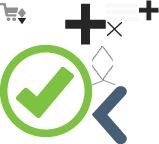
<style>
.page{position:relative;width:159px;height:144px;background:#ffffff}
.page>*{position:absolute;margin:0}
.t1{font:84px "OpenSans-Bold";color:#262626}
.t2{font:37.2px "Helvetica-Bold";color:#262626}
</style>
<div class="page">
<p class="t1" style="left:65px;top:3px;width:41px;height:42px">+</p>
<p class="t2" style="left:139px;top:0px;width:20px;height:21px">+</p>
</div>
